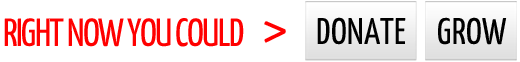
<style>
.page{position:relative;width:520px;height:62px;background:#ffffff}
.page>*{position:absolute;margin:0}
.t1{font:37.2px "YanoneKaffeesatz-Regular";color:#000000;text-transform:uppercase}
.t2{font:39.3px "YanoneKaffeesatz-Regular";letter-spacing:-0.04em;color:#ff0000;text-transform:uppercase}
.t3{font:69.4px "YanoneKaffeesatz-Light";letter-spacing:-0.04em;color:#ff0000;text-transform:uppercase}
</style>
<div class="page">
<p class="t1" style="left:317px;top:17px;width:89px;height:28px">donate</p>
<p class="t1" style="left:438px;top:17px;width:69px;height:28px">GROW</p>
<p class="t2" style="left:4px;top:18px;width:240px;height:29px">right now you could</p>
<p class="t3" style="left:264px;top:21px;width:22px;height:22px">&gt;</p>
</div>
